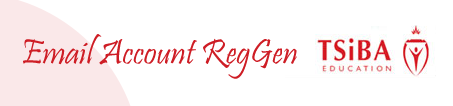
<style>
.page{position:relative;width:453px;height:106px;background:#ffffff}
.page>*{position:absolute;margin:0}
.t1{font:36px "Pristina-Regular";color:#ce1d25}
</style>
<div class="page">
<p class="t1" style="left:23px;top:34px;width:274px;height:45px">Email Account RegGen</p>
</div>
